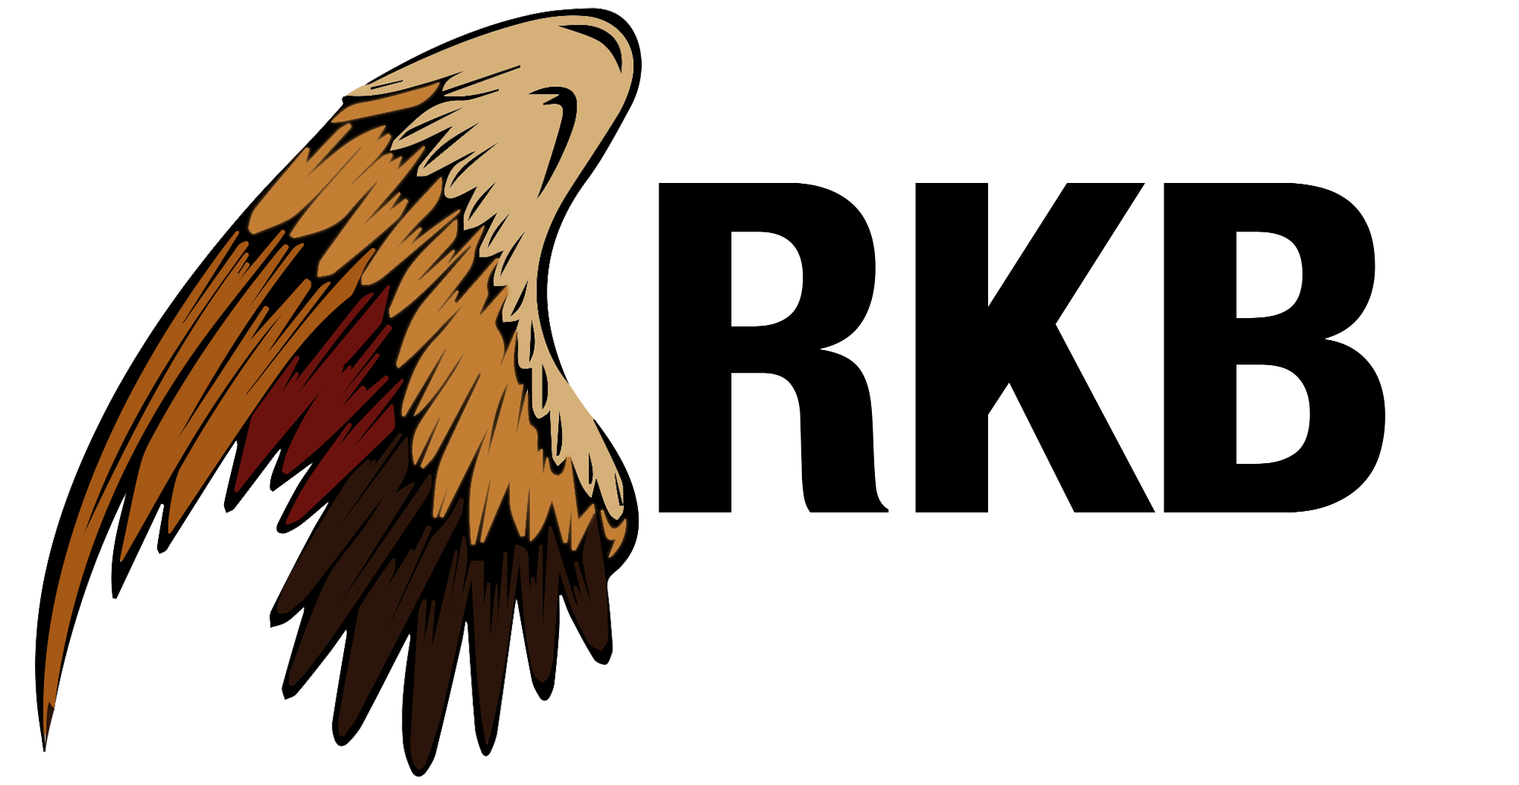
<style>
.page{position:relative;width:1519px;height:785px;background:#ffffff}
.page>*{position:absolute;margin:0}
.t1{font:461.9px "HelveticaNeue-CondensedBold";color:#000000}
</style>
<div class="page">
<p class="t1" style="left:658px;top:183px;width:721px;height:330px">RKB</p>
<p class="t1" style="left:659px;top:183px;width:721px;height:330px">RKB</p>
<p class="t1" style="left:660px;top:183px;width:720px;height:330px">RKB</p>
<p class="t1" style="left:661px;top:183px;width:721px;height:330px">RKB</p>
<p class="t1" style="left:663px;top:183px;width:721px;height:330px">RKB</p>
<p class="t1" style="left:663px;top:183px;width:721px;height:330px">RKB</p>
<p class="t1" style="left:664px;top:183px;width:720px;height:330px">RKB</p>
<p class="t1" style="left:664px;top:183px;width:721px;height:330px">RKB</p>
<p class="t1" style="left:664px;top:183px;width:721px;height:330px">RKB</p>
</div>
